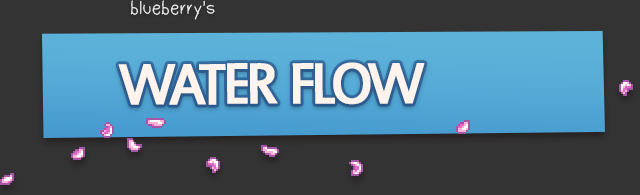
<style>
.page{position:relative;width:640px;height:195px;background:#333333}
.page>*{position:absolute;margin:0}
.t1{font:20px "Dudu_Calligraphy";color:#f2f2f2}
.t2{font:90px "EstrangeloEdessa";letter-spacing:-0.075em;color:#fff3ed;font-variant:small-caps;font-weight:bold;scale:0.95 1}
</style>
<div class="page">
<p class="t1" style="left:130px;top:0px;width:85px;height:20px">blueberry's</p>
<p class="t2" style="left:118px;top:62px;width:307px;height:43px">water flow</p>
</div>
